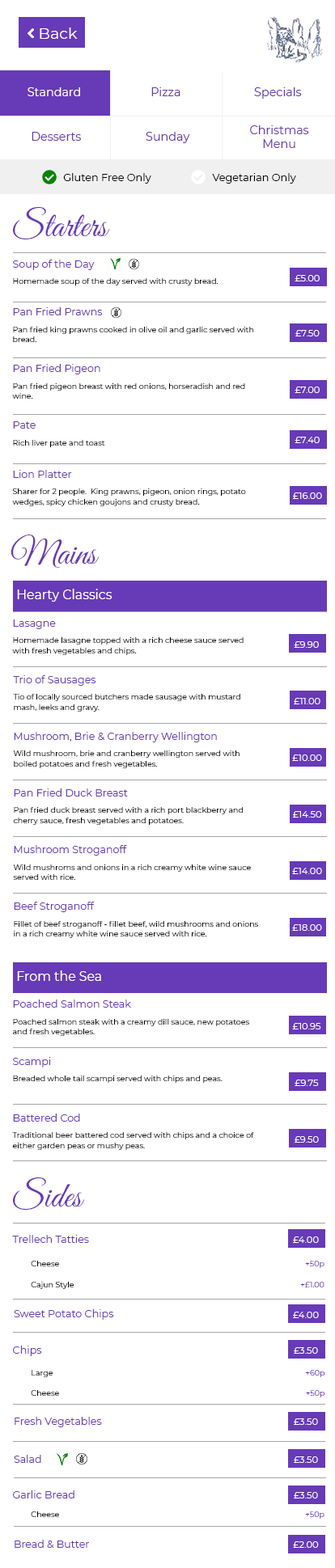
<style>
.page{position:relative;width:335px;height:1568px;background:#ffffff}
.page>*{position:absolute;margin:0}
.t1{font:15.4px "Montserrat-Regular";color:#ffffff}
.t2{font:11.5px "Montserrat-Regular";color:#ffffff}
.t3{font:11.5px "Montserrat-Regular";color:#673ab7}
.t4{font:11.5px/13.8px "Montserrat-Regular";color:#673ab7}
.t5{font:10.4px "Montserrat-Regular";color:#000000}
.t6{font:35.7px "GreatVibes-Regular";color:#673ab7}
.t7{font:10.2px "Montserrat-Regular";color:#673ab7}
.t8{font:7.7px "Montserrat-Regular";color:#000000}
.t9{font:9.4px "Montserrat-Regular";color:#ffffff}
.t10{font:7.7px/10.2px "Montserrat-Regular";color:#000000}
.t11{font:12.8px "Montserrat-Regular";color:#ffffff}
.t12{font:7.7px/10.2px "Montserrat-Regular";color:#673ab7}
.t13{font:7.7px "Montserrat-Regular";color:#673ab7}
</style>
<div class="page">
<p class="t1" style="left:40px;top:27px;width:38px;height:12px">Back</p>
<p class="t2" style="left:27px;top:87px;width:53px;height:9px">Standard</p>
<p class="t3" style="left:151px;top:87px;width:29px;height:9px">Pizza</p>
<p class="t3" style="left:254px;top:87px;width:48px;height:12px">Specials</p>
<p class="t4" style="left:250px;top:125px;width:59px;height:23px;text-align:center">Christmas <br>Menu</p>
<p class="t3" style="left:32px;top:132px;width:49px;height:9px">Desserts</p>
<p class="t3" style="left:146px;top:132px;width:44px;height:11px">Sunday</p>
<p class="t5" style="left:63px;top:173px;width:88px;height:11px">Gluten Free Only</p>
<p class="t5" style="left:212px;top:173px;width:84px;height:11px">Vegetarian Only</p>
<p class="t6" style="left:13px;top:207px;width:97px;height:32px">Starters</p>
<p class="t7" style="left:13px;top:260px;width:82px;height:10px">Soup of the Day</p>
<p class="t8" style="left:13px;top:278px;width:205px;height:7px">Homemade soup of the day served with crusty bread.</p>
<p class="t9" style="left:294px;top:275px;width:25px;height:6px">£5.00</p>
<p class="t7" style="left:13px;top:307px;width:90px;height:8px">Pan Fried Prawns</p>
<p class="t10" style="left:13px;top:327px;width:241px;height:15px">Pan fried king prawns cooked in olive oil and garlic served with bread.</p>
<p class="t9" style="left:295px;top:330px;width:24px;height:6px">£7.50</p>
<p class="t7" style="left:13px;top:364px;width:87px;height:10px">Pan Fried Pigeon</p>
<p class="t10" style="left:12px;top:383px;width:233px;height:16px">Pan fried pigeon breast with red onions, horseradish and red wine.</p>
<p class="t9" style="left:294px;top:387px;width:25px;height:6px">£7.00</p>
<p class="t7" style="left:13px;top:421px;width:23px;height:8px">Pate</p>
<p class="t9" style="left:294px;top:437px;width:25px;height:6px">£7.40</p>
<p class="t8" style="left:13px;top:440px;width:92px;height:7px">Rich liver pate and toast</p>
<p class="t7" style="left:13px;top:470px;width:59px;height:8px">Lion Platter</p>
<p class="t10" style="left:12px;top:488px;width:234px;height:18px">Sharer for 2 people.  King prawns, pigeon, onion rings, potato wedges, spicy chicken goujons and crusty bread.</p>
<p class="t9" style="left:293px;top:492px;width:29px;height:7px">£16.00</p>
<p class="t6" style="left:11px;top:535px;width:88px;height:33px">Mains</p>
<p class="t11" style="left:17px;top:589px;width:95px;height:13px">Hearty Classics</p>
<p class="t7" style="left:13px;top:619px;width:43px;height:10px">Lasagne</p>
<p class="t10" style="left:12px;top:637px;width:231px;height:18px">Homemade lasagne topped with a rich cheese sauce served<br>with fresh vegetables and chips.</p>
<p class="t9" style="left:294px;top:641px;width:25px;height:7px">£9.90</p>
<p class="t7" style="left:13px;top:675px;width:83px;height:11px">Trio of Sausages</p>
<p class="t10" style="left:13px;top:694px;width:227px;height:18px">Tio of locally sourced butchers made sausage with mustard mash, leeks and gravy.</p>
<p class="t9" style="left:294px;top:698px;width:26px;height:6px">£11.00</p>
<p class="t7" style="left:14px;top:732px;width:203px;height:10px">Mushroom, Brie &amp; Cranberry Wellington</p>
<p class="t10" style="left:13px;top:750px;width:226px;height:18px">Wild mushroom, brie and cranberry wellington served with boiled potatoes and fresh vegetables.</p>
<p class="t9" style="left:292px;top:754px;width:30px;height:7px">£10.00</p>
<p class="t7" style="left:14px;top:788px;width:114px;height:9px">Pan Fried Duck Breast</p>
<p class="t10" style="left:13px;top:807px;width:230px;height:18px">Pan fried duck breast served with a rich port blackberry and cherry sauce, fresh vegetables and potatoes.</p>
<p class="t9" style="left:293px;top:811px;width:29px;height:7px">£14.50</p>
<p class="t7" style="left:14px;top:845px;width:113px;height:11px">Mushroom Stroganoff</p>
<p class="t10" style="left:13px;top:864px;width:238px;height:16px">Wild mushroms and onions in a rich creamy white wine sauce served with rice.</p>
<p class="t9" style="left:292px;top:868px;width:30px;height:6px">£14.00</p>
<p class="t7" style="left:14px;top:902px;width:81px;height:10px">Beef Stroganoff</p>
<p class="t10" style="left:14px;top:921px;width:244px;height:17px">Fillet of beef stroganoff - fillet beef, wild mushrooms and onions in a rich creamy white wine sauce served with rice.</p>
<p class="t9" style="left:292px;top:924px;width:30px;height:7px">£18.00</p>
<p class="t11" style="left:17px;top:970px;width:84px;height:11px">From the Sea</p>
<p class="t7" style="left:13px;top:1000px;width:118px;height:8px">Poached Salmon Steak</p>
<p class="t10" style="left:12px;top:1019px;width:237px;height:17px">Poached salmon steak with a creamy dill sauce, new potatoes and fresh vegetables.</p>
<p class="t9" style="left:292px;top:1023px;width:29px;height:6px">£10.95</p>
<p class="t7" style="left:13px;top:1057px;width:38px;height:10px">Scampi</p>
<p class="t8" style="left:13px;top:1076px;width:209px;height:7px">Breaded whole tail scampi served with chips and peas.</p>
<p class="t9" style="left:294px;top:1080px;width:25px;height:6px">£9.75</p>
<p class="t7" style="left:13px;top:1114px;width:67px;height:8px">Battered Cod</p>
<p class="t10" style="left:12px;top:1132px;width:242px;height:18px">Traditional beer battered cod served with chips and a choice of either garden peas or mushy peas.</p>
<p class="t9" style="left:294px;top:1136px;width:25px;height:7px">£9.50</p>
<p class="t6" style="left:13px;top:1177px;width:72px;height:33px">Sides</p>
<p class="t7" style="left:12px;top:1235px;width:77px;height:8px">Trellech Tatties</p>
<p class="t9" style="left:293px;top:1236px;width:26px;height:7px">£4.00</p>
<p class="t10" style="left:31px;top:1261px;width:43px;height:28px">Cheese<br><br> Cajun Style</p>
<p class="t12" style="left:300px;top:1261px;width:24px;height:26px;text-align:right"><span class="t10"> <br> <br> </span>+50p<br><br> +£1.00</p>
<p class="t7" style="left:14px;top:1309px;width:100px;height:11px">Sweet Potato Chips</p>
<p class="t9" style="left:293px;top:1312px;width:26px;height:6px">£4.00</p>
<p class="t7" style="left:13px;top:1346px;width:29px;height:10px">Chips</p>
<p class="t9" style="left:294px;top:1347px;width:24px;height:7px">£3.50</p>
<p class="t10" style="left:31px;top:1370px;width:28px;height:26px">Large<br><br> Cheese</p>
<p class="t12" style="left:306px;top:1370px;width:19px;height:27px;text-align:right">+60p<br><br>+50p</p>
<p class="t7" style="left:15px;top:1417px;width:87px;height:10px">Fresh Vegetables</p>
<p class="t9" style="left:294px;top:1418px;width:24px;height:7px">£3.50</p>
<p class="t7" style="left:14px;top:1455px;width:27px;height:8px">Salad</p>
<p class="t9" style="left:294px;top:1456px;width:24px;height:7px">£3.50</p>
<p class="t7" style="left:13px;top:1490px;width:61px;height:8px">Garlic Bread</p>
<p class="t9" style="left:294px;top:1492px;width:24px;height:6px">£3.50</p>
<p class="t8" style="left:31px;top:1511px;width:28px;height:6px">Cheese</p>
<p class="t13" style="left:305px;top:1511px;width:19px;height:8px">+50p</p>
<p class="t7" style="left:15px;top:1540px;width:74px;height:8px">Bread &amp; Butter</p>
<p class="t9" style="left:293px;top:1541px;width:26px;height:7px">£2.00</p>
</div>
